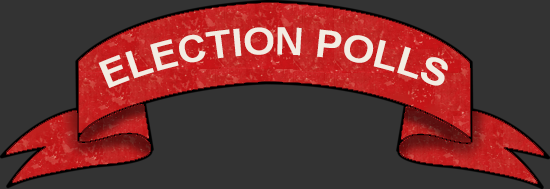
<style>
.page{position:relative;width:550px;height:189px;background:#333333}
.page>*{position:absolute;margin:0}
.t1{font:37.5px "Arial-BoldMT";color:#f2ece2}
</style>
<div class="page">
<p class="t1" style="left:98px;top:27px;width:350px;height:61px">ELECTION POLLS</p>
</div>
